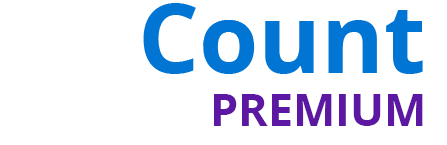
<style>
.page{position:relative;width:447px;height:145px;background:#ffffff}
.page>*{position:absolute;margin:0}
.t1{font:95.9px "OpenSans-Bold";color:#0075d4}
.t2{font:95.9px "OpenSans-Bold";color:#ffffff}
.t3{font:44.8px "OpenSans-Bold";color:#5d18a3}
</style>
<div class="page">
<p class="t1" style="left:4px;top:0px;width:419px;height:74px"><span class="t2">dis</span>Count</p>
<p class="t3" style="left:214px;top:94px;width:209px;height:32px">PREMIUM</p>
</div>
